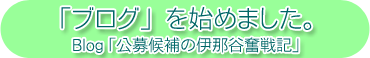
<style>
.page{position:relative;width:370px;height:58px;background:#99ff99}
.page>*{position:absolute;margin:0}
.t1{font:25px "FMotoyaCedar-W1-90mskp-RKSJ-H";color:#006666}
.t2{font:16px "FMotoyaCedar-W1-90mskp-RKSJ-H";color:#006666}
</style>
<div class="page">
<p class="t1" style="left:61px;top:7px;width:251px;height:23px">「ブログ」を始めました。</p>
<p class="t2" style="left:73px;top:37px;width:226px;height:16px">Blog 「公募候補の伊那谷奮戦記」</p>
</div>
